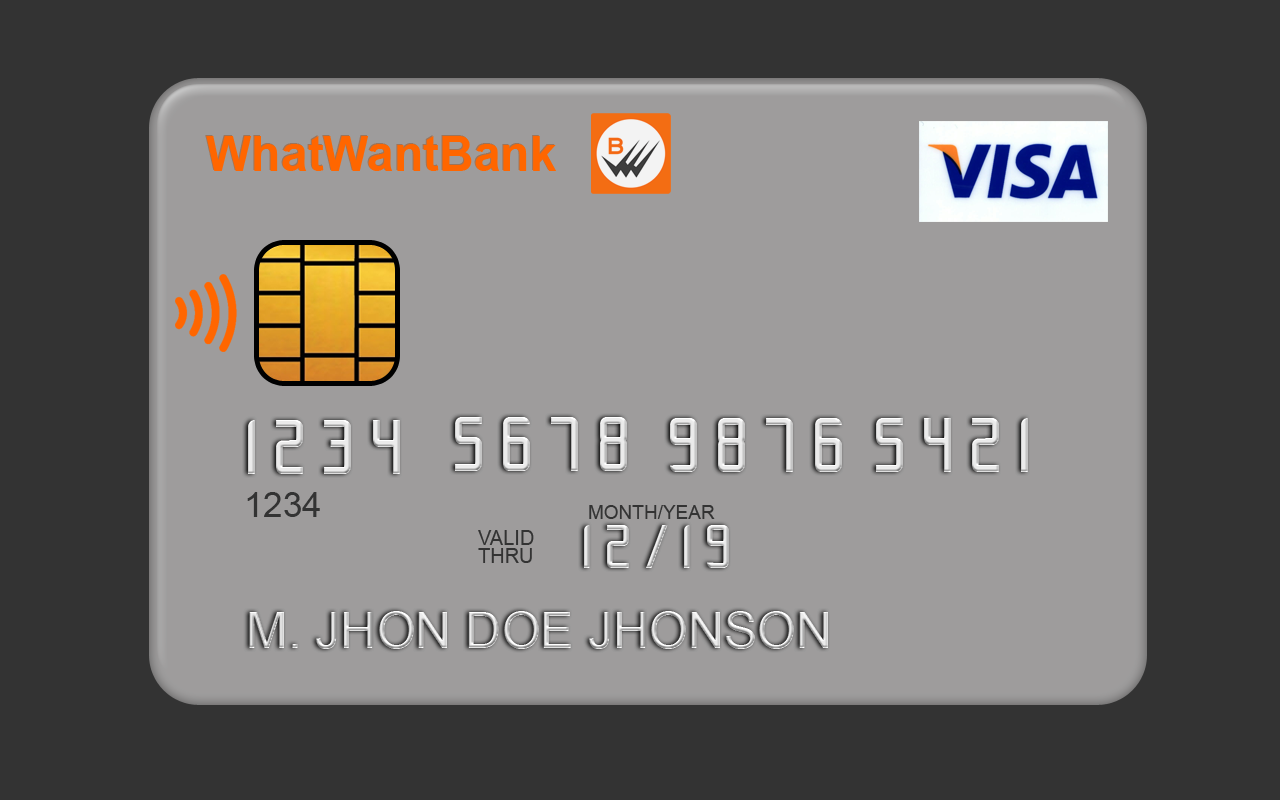
<style>
.page{position:relative;width:1280px;height:800px;background:#9e9c9c}
.page>*{position:absolute;margin:0}
.t1{font:48px "Arial-BoldMT";color:#ff6600}
.t2{font:67px "Slidfis";letter-spacing:0.22em}
.t3{font:35px "ArialMT";color:#333333}
.t4{font:19px "ArialMT";color:#333333}
.t5{font:20px/18px "ArialMT";color:#333333}
.t6{font:54px "Slidfis";letter-spacing:0.22em}
.t7{font:50px "ArialMT"}
</style>
<div class="page">
<p class="t1" style="left:206px;top:136px;width:350px;height:35px">WhatWantBank</p>
<p class="t2" style="left:248px;top:420px;width:152px;height:54px">1234</p>
<p class="t2" style="left:455px;top:417px;width:172px;height:54px">5678</p>
<p class="t2" style="left:670px;top:418px;width:172px;height:54px">9876</p>
<p class="t2" style="left:876px;top:418px;width:152px;height:54px">5421</p>
<p class="t3" style="left:247px;top:492px;width:73px;height:25px">1234</p>
<p class="t4" style="left:589px;top:505px;width:126px;height:14px">MONTH/YEAR</p>
<p class="t5" style="left:478px;top:530px;width:56px;height:33px">VALID<br>THRU</p>
<p class="t6" style="left:584px;top:525px;width:145px;height:43px">12/19</p>
<p class="t7" style="left:249px;top:611px;width:579px;height:38px">M. JHON DOE JHONSON</p>
</div>
